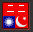
<style>
.page{position:relative;width:33px;height:32px;background:#f20000}
.page>*{position:absolute;margin:0}
.t1{font:10.4px "SimSun";color:#ffffff}
</style>
<div class="page">
<p class="t1" style="left:7px;top:5px;width:18px;height:7px">二二</p>
</div>
